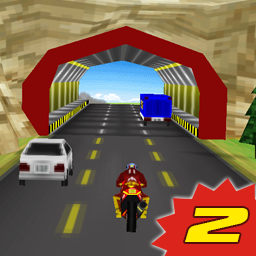
<style>
.page{position:relative;width:256px;height:256px}
.page>*{position:absolute;margin:0}
.t1{font:48px "DreamMMA";color:#ffea00;scale:1.14 1}
</style>
<div class="page">
<p class="t1" style="left:185px;top:208px;width:63px;height:34px">2</p>
</div>
